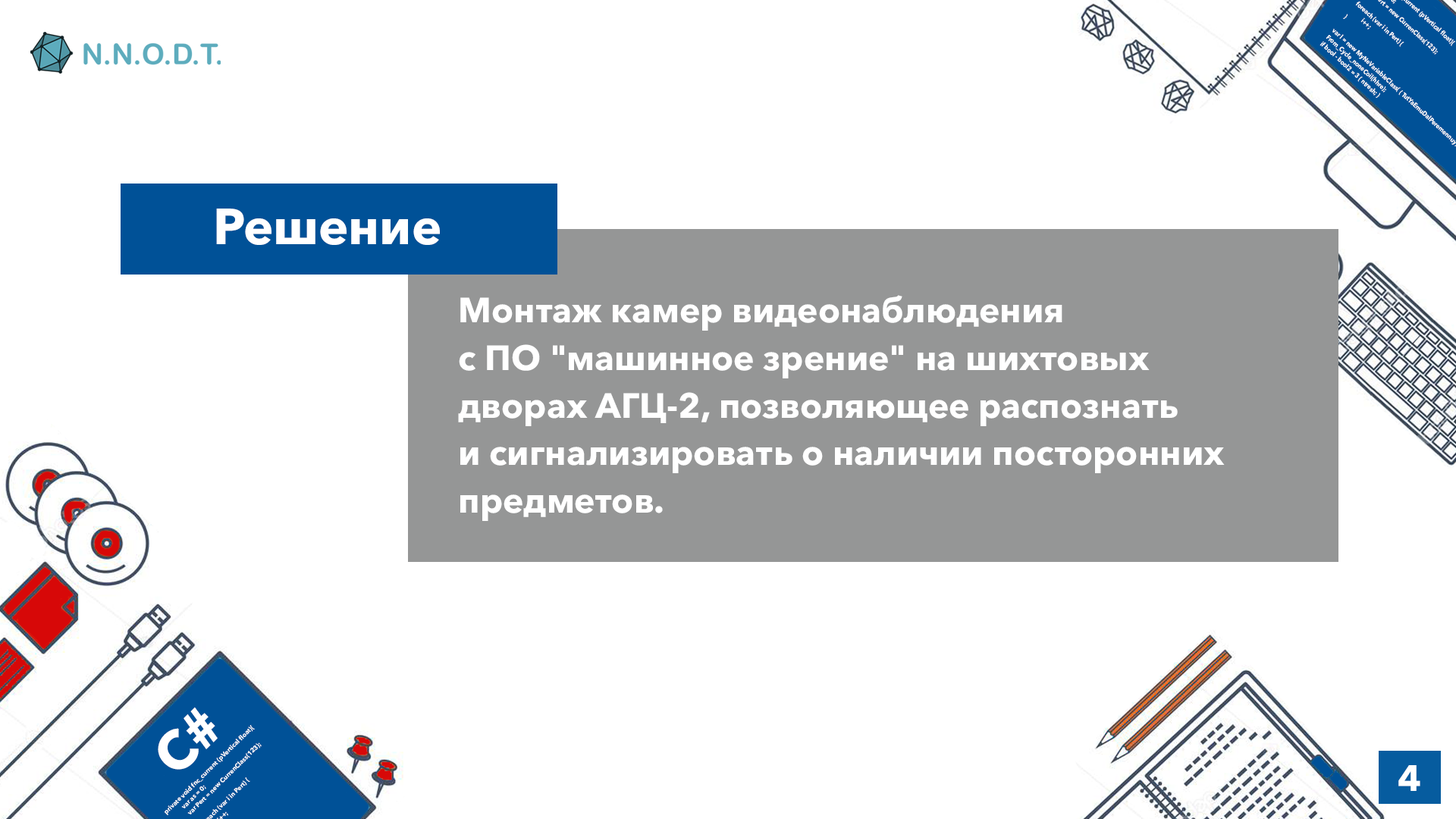
<style>
.page{position:relative;width:1456px;height:819px;background:#ffffff}
.page>*{position:absolute;margin:0}
.t1{font:50.2px "AvenirNextCyr-Bold";color:#ffffff}
.t2{font:34.9px/46.9px "AvenirNextCyr-Bold";color:#ffffff}
.t3{font:53.7px "AvenirNextCyr-Bold";color:#ffffff}
.t4{font:36.4px "AvenirNextCyr-Bold";color:#ffffff}
</style>
<div class="page">
<p class="t1" style="left:216px;top:209px;width:224px;height:36px">Решение</p>
<p class="t2" style="left:458px;top:295px;width:767px;height:226px">Монтаж камер видеонаблюдения<br>с ПО "машинное зрение" на шихтовых<br>дворах АГЦ-2, позволяющее распознать<br>и сигнализировать о наличии посторонних<br>предметов.</p>
<p class="t3" style="left:158px;top:707px;width:60px;height:63px;rotate:-44deg">C#</p>
<p class="t4" style="left:1398px;top:765px;width:22px;height:26px">4</p>
</div>
